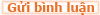
<style>
.page{position:relative;width:100px;height:15px;background:#feebe1}
.page>*{position:absolute;margin:0}
.t1{font:13px "Tahoma-Bold";color:#e97129}
</style>
<div class="page">
<p class="t1" style="left:7px;top:1px;width:87px;height:14px">Gửi bình luận</p>
</div>
